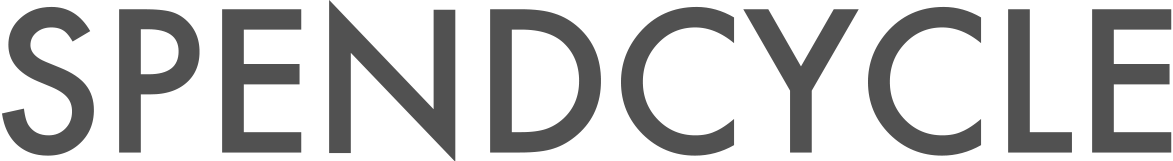
<style>
.page{position:relative;width:1173px;height:161px;background:#ffffff}
.page>*{position:absolute;margin:0}
.t1{font:190px "Futura-Medium";color:#515151}
</style>
<div class="page">
<p class="t1" style="left:2px;top:0px;width:1170px;height:162px">SPENDCYCLE</p>
</div>
